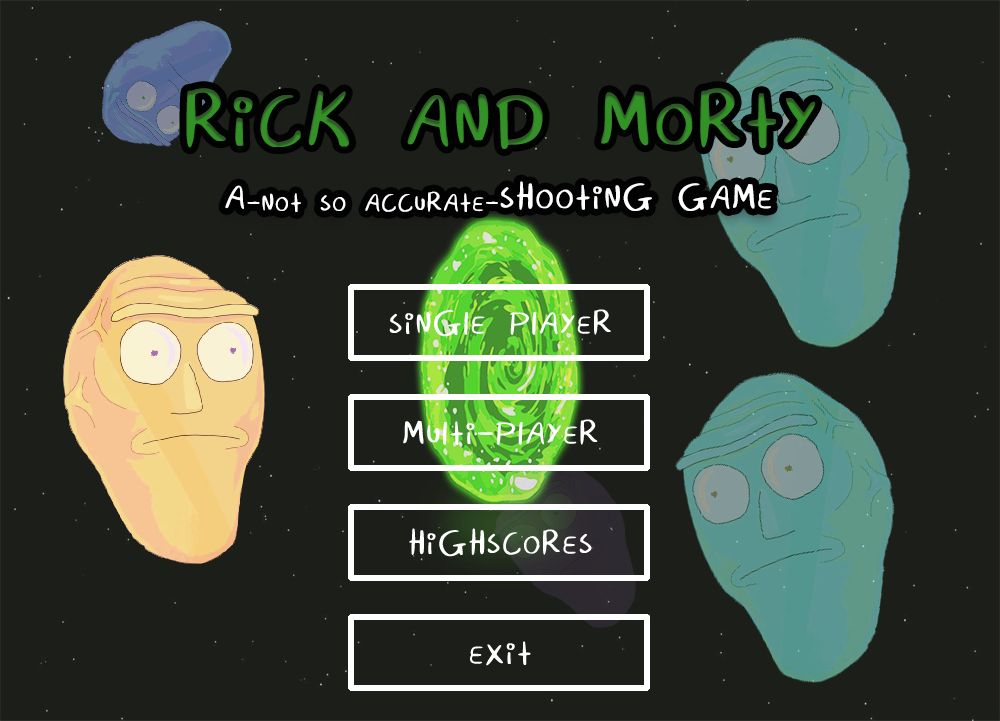
<style>
.page{position:relative;width:1000px;height:721px;background:#1c1e1a}
.page>*{position:absolute;margin:0}
.t1{font:105px "Rick_and_Morty";letter-spacing:0.06em;color:#339226;text-transform:uppercase}
.t2{font:36px "Rick_and_Morty";letter-spacing:0.06em;color:#ffffff;text-transform:uppercase}
.t3{font:48px "Rick_and_Morty";letter-spacing:0.06em;color:#ffffff;text-transform:uppercase}
.t4{font:45.3px "Rick_and_Morty";letter-spacing:0.06em;color:#ffffff;text-transform:uppercase}
</style>
<div class="page">
<p class="t1" style="left:186px;top:88px;width:630px;height:61px">Rick and Morty</p>
<p class="t2" style="left:225px;top:181px;width:547px;height:31px"><span class="t3">A</span>-not so accurate-<span class="t3">Shooting Game</span></p>
<p class="t4" style="left:389px;top:309px;width:222px;height:28px">Single Player</p>
<p class="t4" style="left:403px;top:419px;width:195px;height:26px">Multi-Player</p>
<p class="t4" style="left:409px;top:528px;width:183px;height:29px">Highscores</p>
<p class="t4" style="left:470px;top:641px;width:61px;height:25px">Exit</p>
</div>
